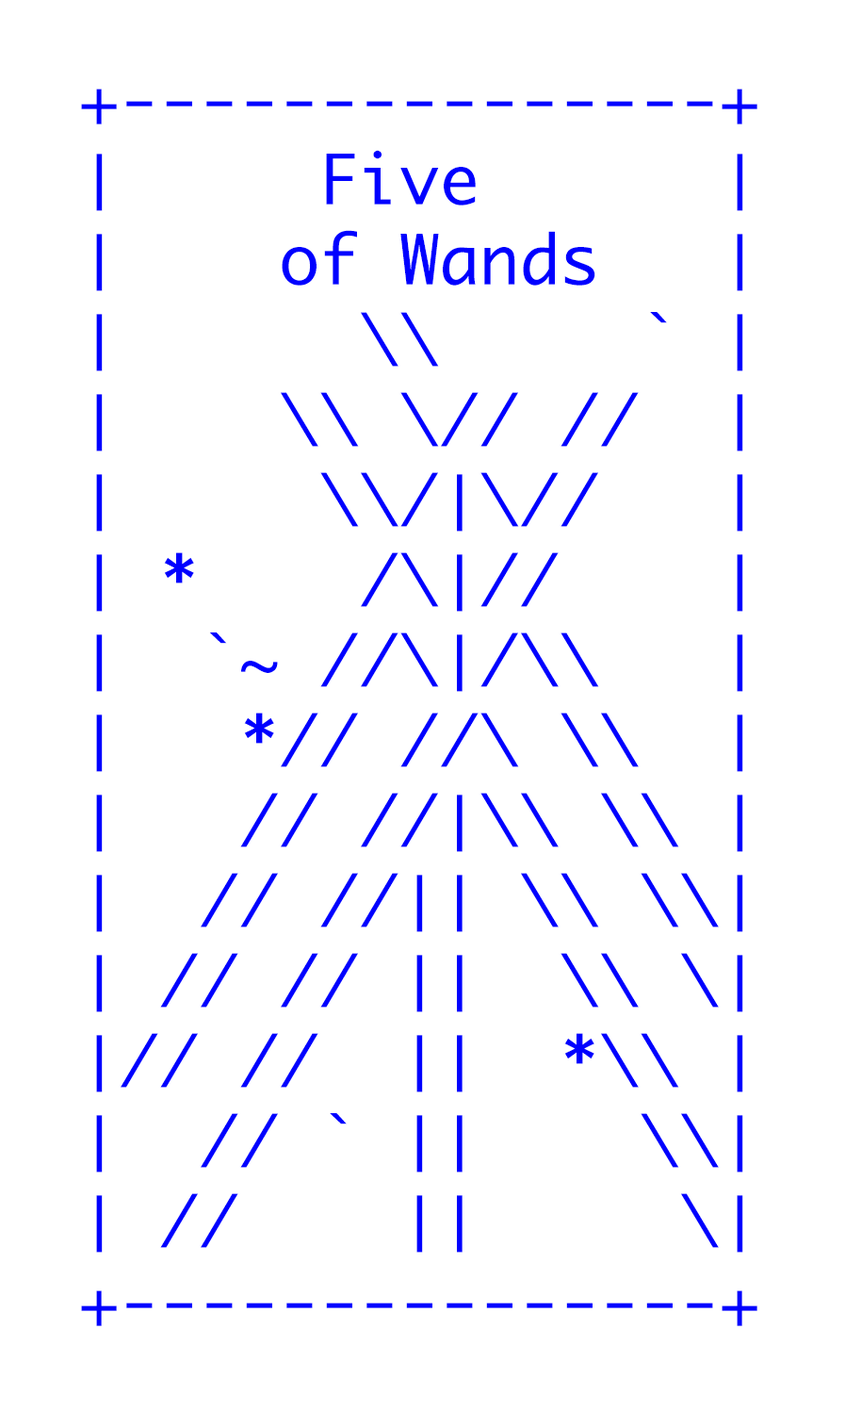
<style>
.page{position:relative;width:845px;height:1411px;background:#ffffff}
.page>*{position:absolute;margin:0}
.t1{font:66.7px "Monaco";color:#0000ff}
</style>
<div class="page">
<p class="t1" style="left:81px;top:89px;width:677px;height:1237px">+---------------+<br>│     Five      │<br>│    of Wands   │<br>│      \\     ` │<br>│    \\ \// //  │<br>│     \\/│\//   │<br>│ *    /\│//    │<br>│  `~ //\│/\\   │ <br>│   *// //\ \\  │ <br>│   // //│\\ \\ │<br>│  // //││ \\ \\│ <br>│ // // ││  \\ \│ <br>│// //  ││  *\\ │<br>│  // ` ││    \\│<br>│ //    ││     \│<br>+---------------+</p>
</div>
